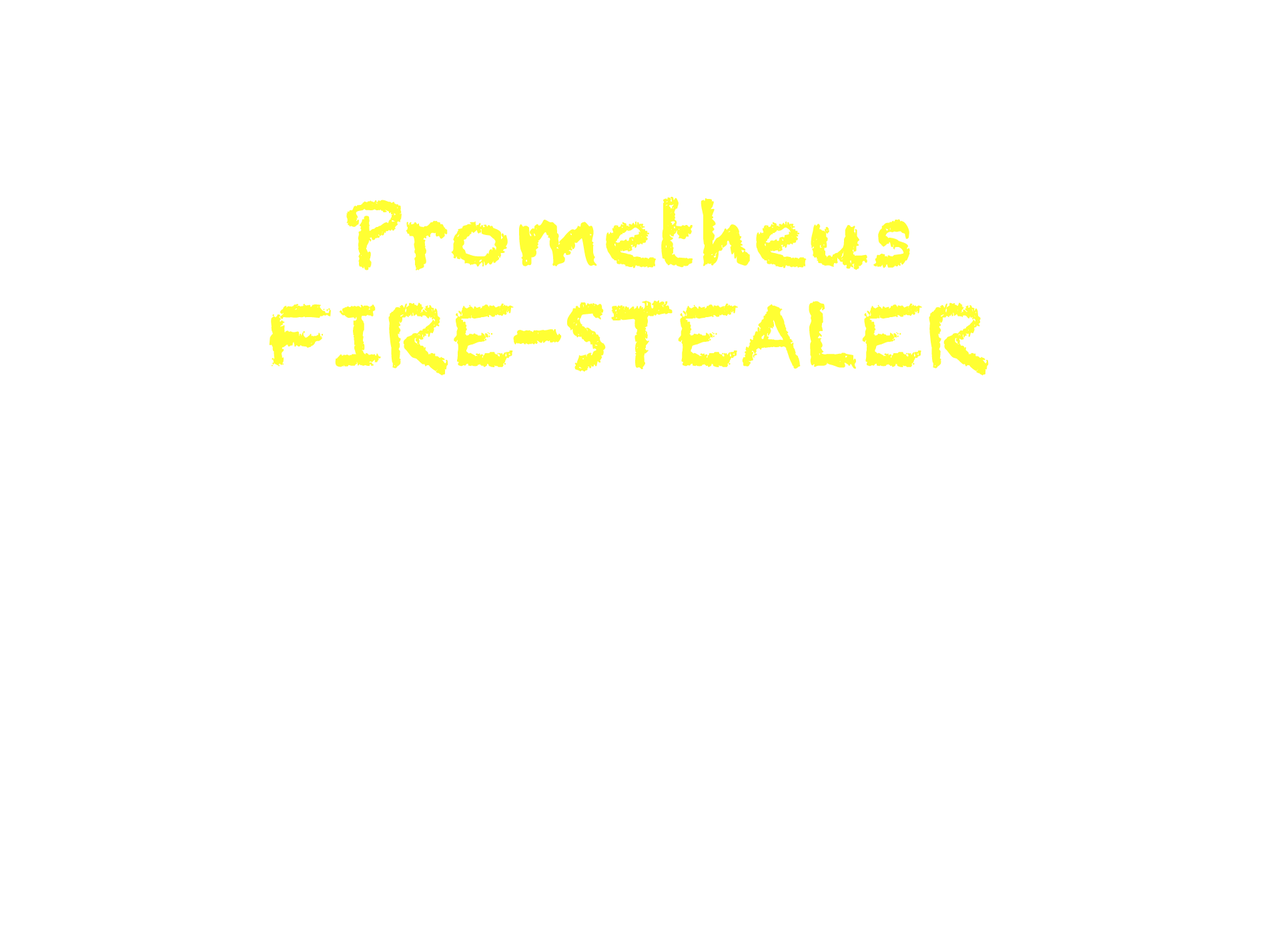
<style>
.page{position:relative;width:1261px;height:946px;background:#ffffff}
.page>*{position:absolute;margin:0}
.t1{font:83.4px "Chalkduster";letter-spacing:0.005em;color:#ffff33;font-weight:bold}
</style>
<div class="page">
<p class="t1" style="left:269px;top:196px;width:720px;height:180px;text-align:center">Prometheus<br>FIRE-STEALER</p>
</div>
